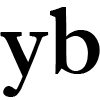
<style>
.page{position:relative;width:100px;height:100px;background:#ffffff}
.page>*{position:absolute;margin:0}
.t1{font:100px "Garamond-Bold";color:#000000}
</style>
<div class="page">
<p class="t1" style="left:0px;top:7px;width:100px;height:90px">yb</p>
</div>
